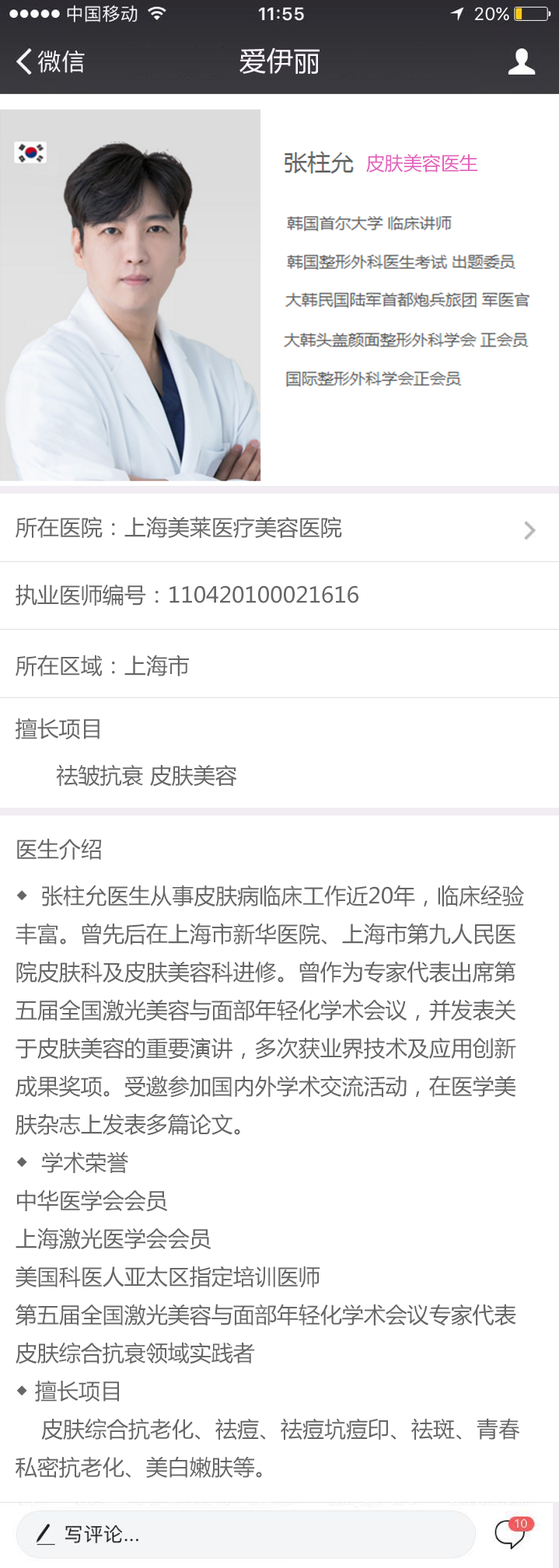
<style>
.page{position:relative;width:559px;height:1568px;background:#ffffff}
.page>*{position:absolute;margin:0}
.t1{font:26.4px "MicrosoftYaHei";letter-spacing:0.025em;color:#fcf3ff}
.t2{font:18.7px "MicrosoftYaHei";color:#e362bd}
.t3{font:21.8px "MicrosoftYaHei";color:#666666}
.t4{font:21.8px/46.6px "MicrosoftYaHei";color:#666666}
</style>
<div class="page">
<p class="t1" style="left:239px;top:47px;width:81px;height:27px">爱伊丽</p>
<p class="t2" style="left:366px;top:154px;width:112px;height:19px">皮肤美容医生</p>
<p class="t3" style="left:16px;top:516px;width:326px;height:23px">所在医院：上海美莱医疗美容医院</p>
<p class="t3" style="left:16px;top:584px;width:342px;height:22px">执业医师编号：110420100021616</p>
<p class="t3" style="left:16px;top:655px;width:173px;height:21px">所在区域：上海市</p>
<p class="t4" style="left:16px;top:718px;width:221px;height:69px">擅长项目<br>   祛皱抗衰 皮肤美容</p>
<p class="t3" style="left:17px;top:838px;width:84px;height:23px">医生介绍</p>
<p class="t3" style="left:16px;top:885px;width:508px;height:594px">◆  张柱允医生从事皮肤病临床工作近20年，临床经验<br>丰富。曾先后在上海市新华医院、上海市第九人民医<br>院皮肤科及皮肤美容科进修。曾作为专家代表出席第<br>五届全国激光美容与面部年轻化学术会议，并发表关<br>于皮肤美容的重要演讲，多次获业界技术及应用创新<br>成果奖项。受邀参加国内外学术交流活动，在医学美<br>肤杂志上发表多篇论文。<br>◆  学术荣誉<br>中华医学会会员<br>上海激光医学会会员<br>美国科医人亚太区指定培训医师<br>第五届全国激光美容与面部年轻化学术会议专家代表<br>皮肤综合抗衰领域实践者<br>◆ 擅长项目<br>    皮肤综合抗老化、祛痘、祛痘坑痘印、祛斑、青春<br>私密抗老化、美白嫩肤等。</p>
</div>
